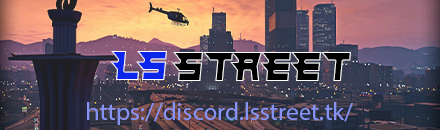
<style>
.page{position:relative;width:440px;height:130px}
.page>*{position:absolute;margin:0}
.t1{font:41.7px "Hindsight2020";color:#0b25eb;scale:0.92 1}
.t2{font:25px "MyriadPro-Regular";color:#8793f2}
</style>
<div class="page">
<p class="t1" style="left:110px;top:51px;width:57px;height:29px">LS</p>
<p class="t2" style="left:87px;top:102px;width:266px;height:23px">https://discord.lsstreet.tk/</p>
</div>
